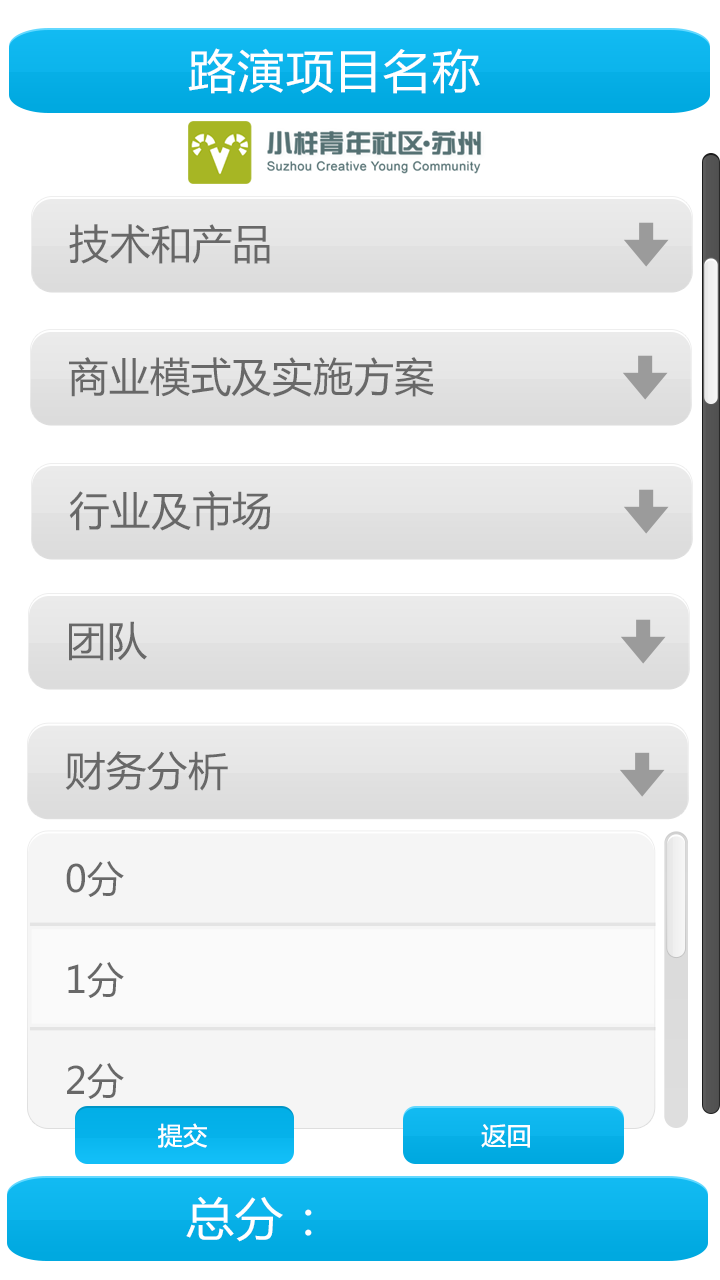
<style>
.page{position:relative;width:720px;height:1280px;background:#ffffff}
.page>*{position:absolute;margin:0}
.t1{font:45.8px "MicrosoftYaHei";letter-spacing:0.01em;color:#ffffff;scale:1.05 1}
.t2{font:40.4px "MicrosoftYaHei";letter-spacing:0.01em;color:#686868}
.t3{font:37px/101px "MicrosoftYaHei";letter-spacing:0.01em;color:#686868}
.t4{font:24.8px "MicrosoftYaHei";letter-spacing:0.01em;color:#ffffff}
</style>
<div class="page">
<p class="t1" style="left:188px;top:48px;width:292px;height:46px">路演项目名称</p>
<p class="t2" style="left:69px;top:224px;width:201px;height:40px">技术和产品</p>
<p class="t2" style="left:69px;top:357px;width:365px;height:40px">商业模式及实施方案</p>
<p class="t2" style="left:69px;top:490px;width:202px;height:41px">行业及市场</p>
<p class="t2" style="left:69px;top:621px;width:78px;height:40px">团队</p>
<p class="t2" style="left:65px;top:751px;width:163px;height:40px">财务分析</p>
<p class="t3" style="left:66px;top:861px;width:58px;height:238px">0分<br>1分<br>2分</p>
<p class="t4" style="left:158px;top:1123px;width:49px;height:25px">提交</p>
<p class="t4" style="left:481px;top:1124px;width:49px;height:24px">返回</p>
<p class="t1" style="left:186px;top:1196px;width:126px;height:46px">总分：</p>
</div>
